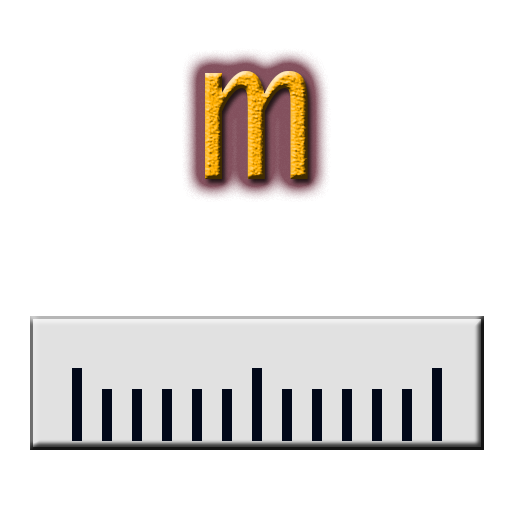
<style>
.page{position:relative;width:512px;height:512px;background:#ffffff}
.page>*{position:absolute;margin:0}
.t1{font:200px "LucidaConsole"}
</style>
<div class="page">
<p class="t1" style="left:205px;top:71px;width:103px;height:108px">m</p>
</div>
